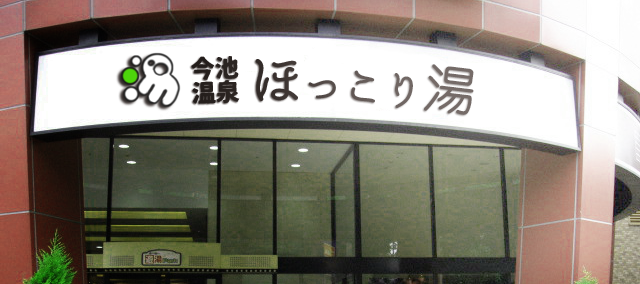
<style>
.page{position:relative;width:640px;height:284px}
.page>*{position:absolute;margin:0}
.t1{font:24px/24px "07TetsubinGothic";color:#362e2b}
.t2{font:54px "TouhouFolklore";color:#362e2b}
.t3{font:51.9px "Jun201Pro-Regular";color:#756b68;scale:0.96 1}
.t4{font:40px "TouhouFolklore";color:#665c59}
</style>
<div class="page">
<p class="t1" style="left:191px;top:56px;width:49px;height:48px;rotate:-2deg">今池<br>温泉</p>
<p class="t2" style="left:255px;top:59px;width:43px;height:42px">ほ</p>
<p class="t3" style="left:424px;top:64px;width:50px;height:51px;rotate:7deg">湯</p>
<p class="t4" style="left:308px;top:70px;width:105px;height:38px;rotate:5deg">っこり</p>
</div>
